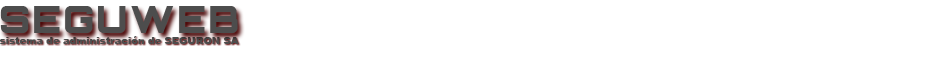
<style>
.page{position:relative;width:940px;height:60px;background:#ffffff}
.page>*{position:absolute;margin:0}
.t1{font:38px "Orbitron-Black";letter-spacing:0.05em;color:#4d4d4d}
.t2{font:10px "Arial-Black";color:#4d4d4d}
</style>
<div class="page">
<p class="t1" style="left:0px;top:6px;width:238px;height:27px">SEGUWEB</p>
<p class="t2" style="left:0px;top:36px;width:239px;height:8px">sistema de administración de SEGURON SA</p>
</div>
